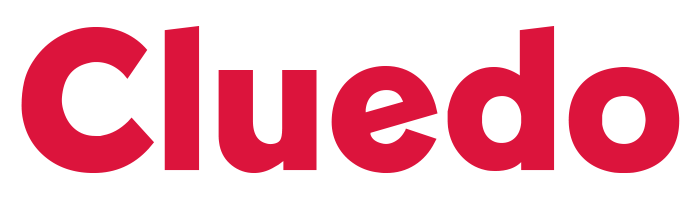
<style>
.page{position:relative;width:700px;height:200px;background:#ffffff}
.page>*{position:absolute;margin:0}
.t1{font:200px "Pythagoras";color:#dc143c}
</style>
<div class="page">
<p class="t1" style="left:21px;top:26px;width:659px;height:147px">Cluedo</p>
</div>
